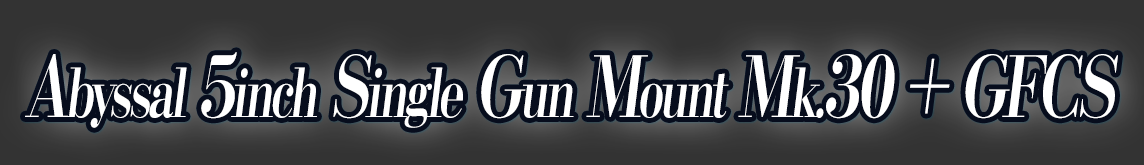
<style>
.page{position:relative;width:1144px;height:165px;background:#333333}
.page>*{position:absolute;margin:0}
.t1{font:84px "KochoStd-Heavy";letter-spacing:-0.08em;color:#ffffff;font-style:italic;scale:0.71 1}
.t2{font:67.2px "KochoStd-Heavy";letter-spacing:-0.08em;color:#ffffff;font-style:italic;scale:0.71 1}
</style>
<div class="page">
<p class="t1" style="left:25px;top:52px;width:1093px;height:76px">A<span class="t2">byssal</span> 5<span class="t2">inch</span> S<span class="t2">ingle</span> G<span class="t2">un</span> M<span class="t2">ount</span> M<span class="t2">k.</span>30 + GFCS</p>
</div>
